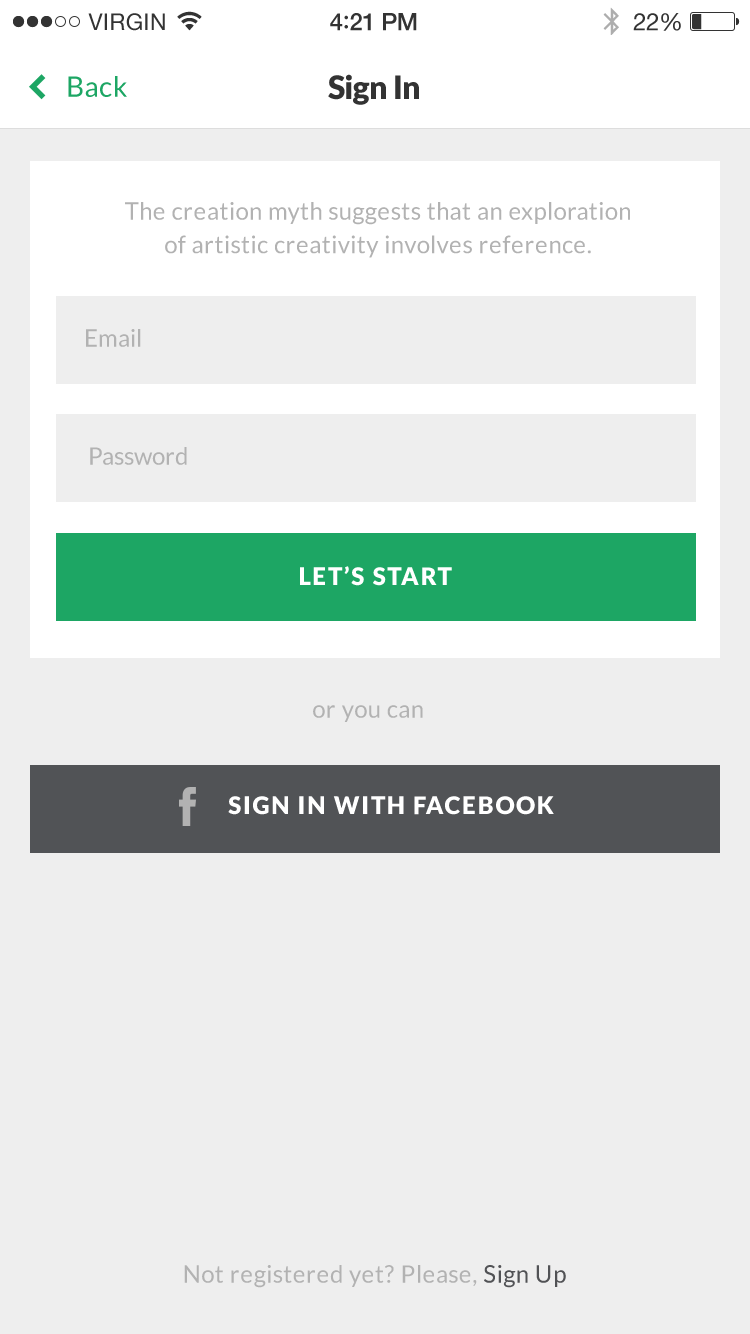
<style>
.page{position:relative;width:750px;height:1334px;background:#eeeeee}
.page>*{position:absolute;margin:0}
.t1{font:28px "Lato-Regular";letter-spacing:0.02em;color:#1da664}
.t2{font:32px "Lato-Black";letter-spacing:-0.02em;color:#333333}
.t3{font:24px/33.6px "Lato-Regular";letter-spacing:0.02em;color:#b2b2b2}
.t4{font:24px "Lato-Regular";color:#b2b2b2}
.t5{font:24px "Lato-Black";letter-spacing:0.07em;color:#ffffff}
.t6{font:24px "Lato-Regular";letter-spacing:0.02em;color:#b2b2b2}
.t7{font:24px "Lato-Regular";letter-spacing:0.02em;color:#515255}
</style>
<div class="page">
<p class="t1" style="left:68px;top:76px;width:59px;height:21px">Back</p>
<p class="t2" style="left:328px;top:74px;width:91px;height:31px">Sign In</p>
<p class="t3" style="left:125px;top:202px;width:505px;height:56px;text-align:center">The creation myth suggests that an exploration <br>of artistic creativity involves reference.</p>
<p class="t4" style="left:86px;top:329px;width:55px;height:18px">Email</p>
<p class="t4" style="left:90px;top:447px;width:97px;height:18px">Password</p>
<p class="t5" style="left:300px;top:566px;width:152px;height:20px">LET’S START</p>
<p class="t6" style="left:313px;top:705px;width:110px;height:17px">or you can</p>
<p class="t5" style="left:228px;top:796px;width:326px;height:19px">SIGN IN WITH FACEBOOK</p>
<p class="t6" style="left:184px;top:1265px;width:382px;height:23px">Not registered yet? Please, <span class="t7">Sign Up</span></p>
</div>
